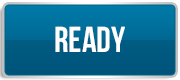
<style>
.page{position:relative;width:180px;height:80px}
.page>*{position:absolute;margin:0}
.t1{font:36px "UTM-Bebas";color:#ffffff}
</style>
<div class="page">
<p class="t1" style="left:55px;top:26px;width:70px;height:26px">ready</p>
</div>
